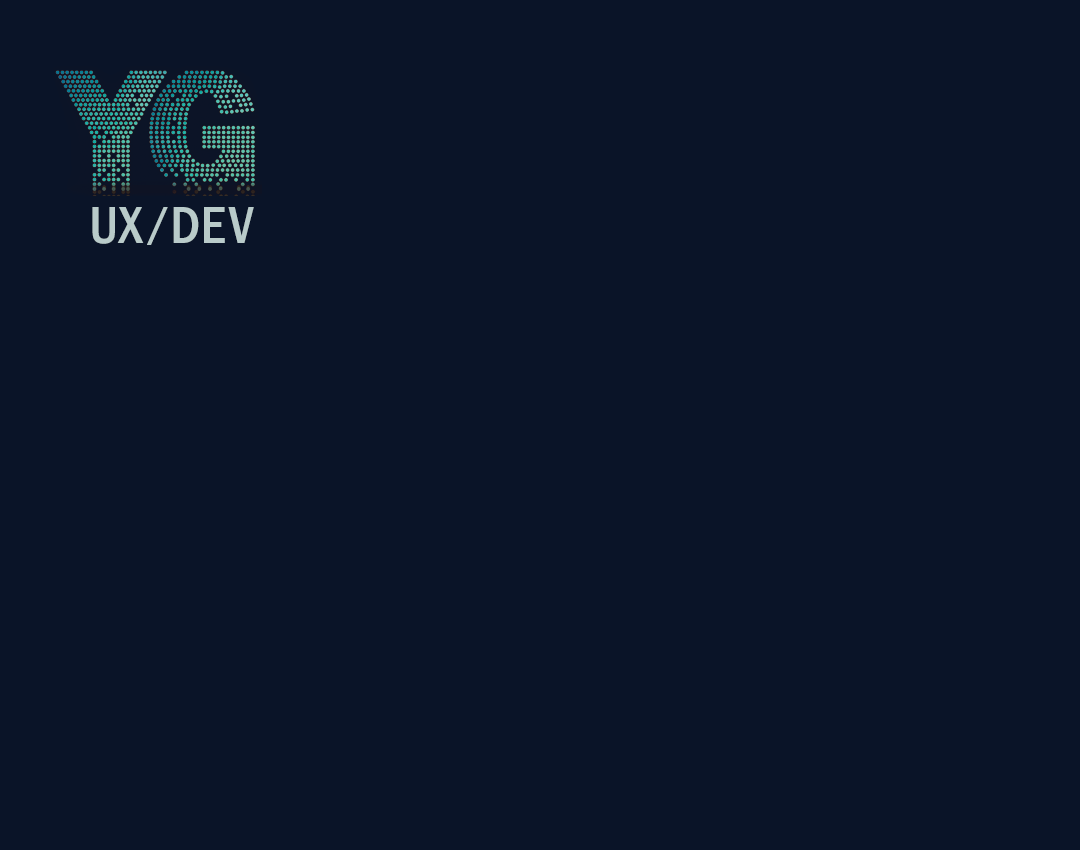
<style>
.page{position:relative;width:1080px;height:850px;background:#0a1428}
.page>*{position:absolute;margin:0}
.t1{font:54px "FranklinGothic-MediumCond";color:#b9cbca;text-transform:uppercase}
</style>
<div class="page">
<p class="t1" style="left:92px;top:207px;width:162px;height:45px">ux/dev</p>
</div>
